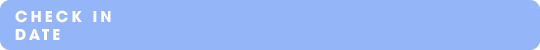
<style>
.page{position:relative;width:540px;height:50px;background:#94b5f7}
.page>*{position:absolute;margin:0}
.t1{font:15px "UTMAvoBold";letter-spacing:0.2em;color:#ffffff}
</style>
<div class="page">
<p class="t1" style="left:15px;top:10px;width:96px;height:30px">CHECK IN<br>DATE</p>
</div>
